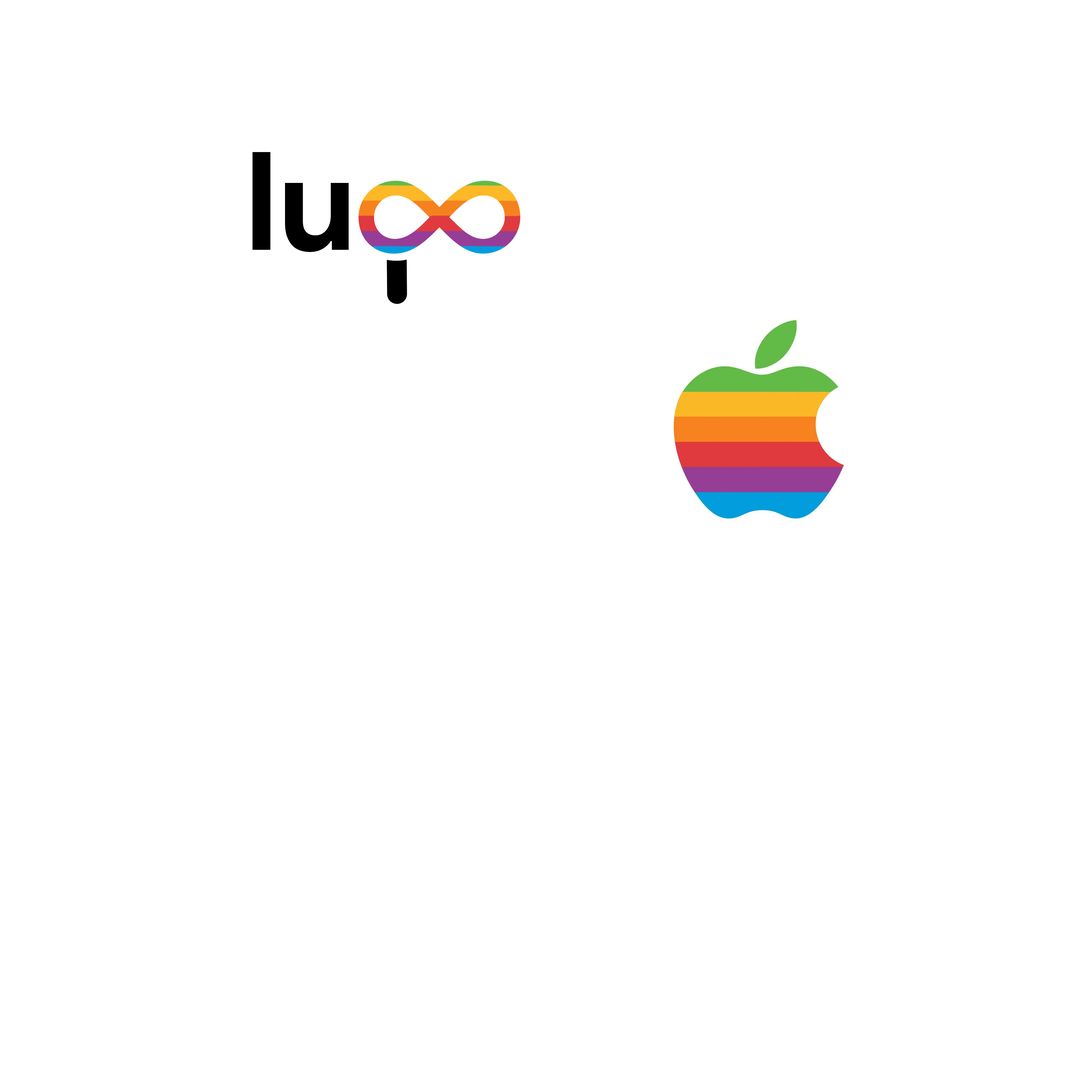
<style>
.page{position:relative;width:1092px;height:1092px;background:#ffffff}
.page>*{position:absolute;margin:0}
.t1{font:136.5px "ProductSans-Bold";color:#000000}
.t2{font:245.7px "MyriadPro-Regular"}
</style>
<div class="page">
<p class="t1" style="left:253px;top:152px;width:96px;height:100px">lu</p>
<p class="t2" style="left:358px;top:181px;width:162px;height:73px;rotate:180deg">∞</p>
</div>
